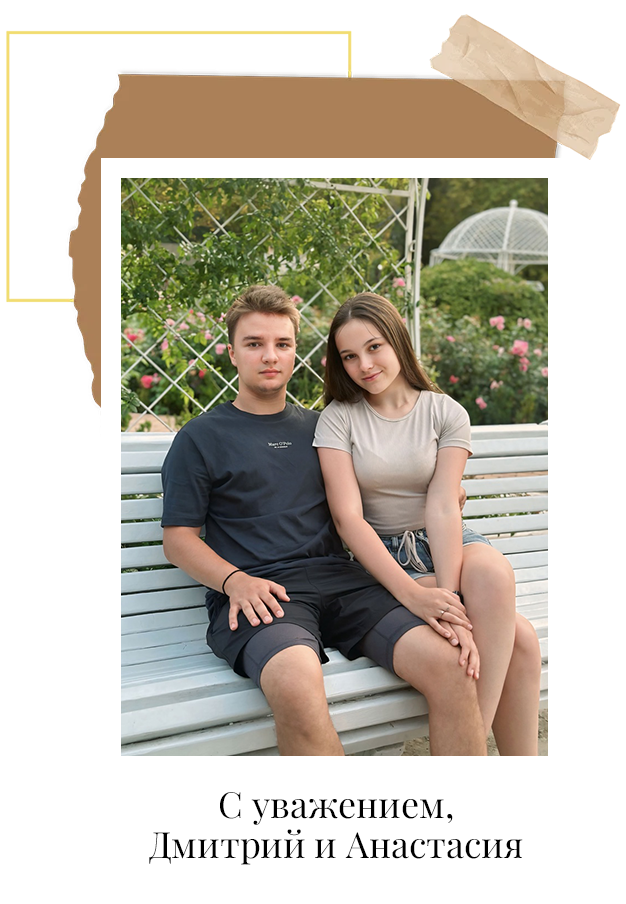
<style>
.page{position:relative;width:626px;height:904px;background:#ffffff}
.page>*{position:absolute;margin:0}
.t1{font:36px/40px "MyPlayfairDisplayFinalRegular";color:#000000}
</style>
<div class="page">
<p class="t1" style="left:149px;top:792px;width:374px;height:73px;text-align:center">С уважением,<br>Дмитрий и Анастасия</p>
</div>
